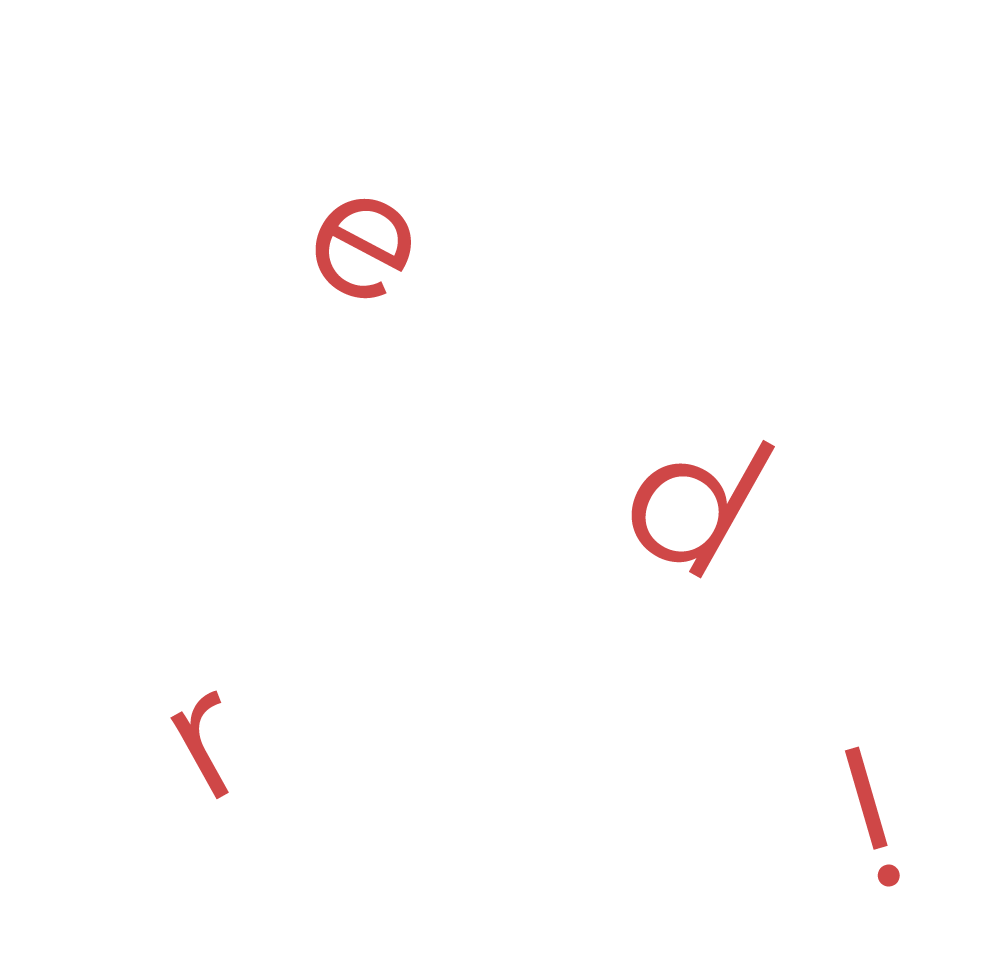
<style>
.page{position:relative;width:1002px;height:978px;background:#ffffff}
.page>*{position:absolute;margin:0}
.t1{font:200px "AvenirNext-Regular";color:#cf4747}
</style>
<div class="page">
<p class="t1" style="left:315px;top:198px;width:96px;height:101px;rotate:28deg">e</p>
<p class="t1" style="left:631px;top:439px;width:144px;height:140px;rotate:29deg">d</p>
<p class="t1" style="left:170px;top:690px;width:59px;height:110px;rotate:-29deg">r</p>
<p class="t1" style="left:844px;top:746px;width:56px;height:141px;rotate:-16deg">!</p>
</div>
